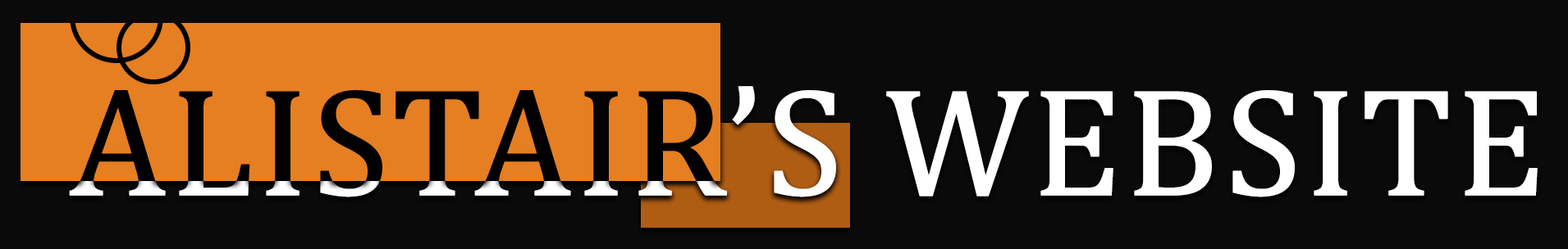
<style>
.page{position:relative;width:1568px;height:249px;background:#0a0a0a}
.page>*{position:absolute;margin:0}
.t1{font:154.9px "Cambria";color:#ffffff;font-weight:bold}
</style>
<div class="page">
<p class="t1" style="left:69px;top:86px;width:1469px;height:112px">ALISTAIR’S WEBSITE</p>
</div>
